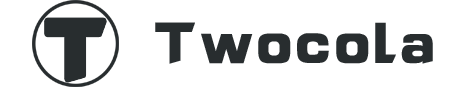
<style>
.page{position:relative;width:468px;height:87px;background:#ffffff}
.page>*{position:absolute;margin:0}
.t1{font:60px "JLinXin";color:#282d2f}
</style>
<div class="page">
<p class="t1" style="left:155px;top:22px;width:278px;height:42px">Twocola</p>
</div>
